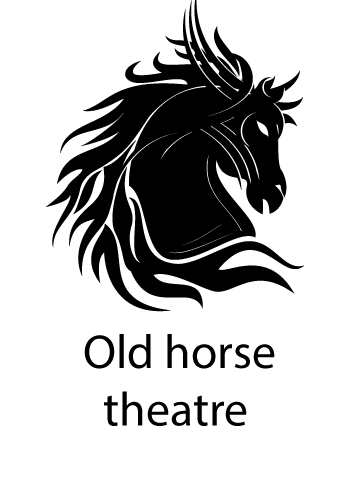
<style>
.page{position:relative;width:350px;height:500px;background:#ffffff}
.page>*{position:absolute;margin:0}
.t1{font:48px "MyriadPro-Regular";color:#000000}
</style>
<div class="page">
<p class="t1" style="left:84px;top:334px;width:191px;height:92px">Old horse<br>  theatre</p>
</div>
